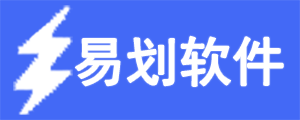
<style>
.page{position:relative;width:300px;height:120px;background:#4369f6}
.page>*{position:absolute;margin:0}
.t1{font:53.2px "SimHei";color:#ffffff}
</style>
<div class="page">
<p class="t1" style="left:75px;top:36px;width:208px;height:50px">易划软件</p>
</div>
